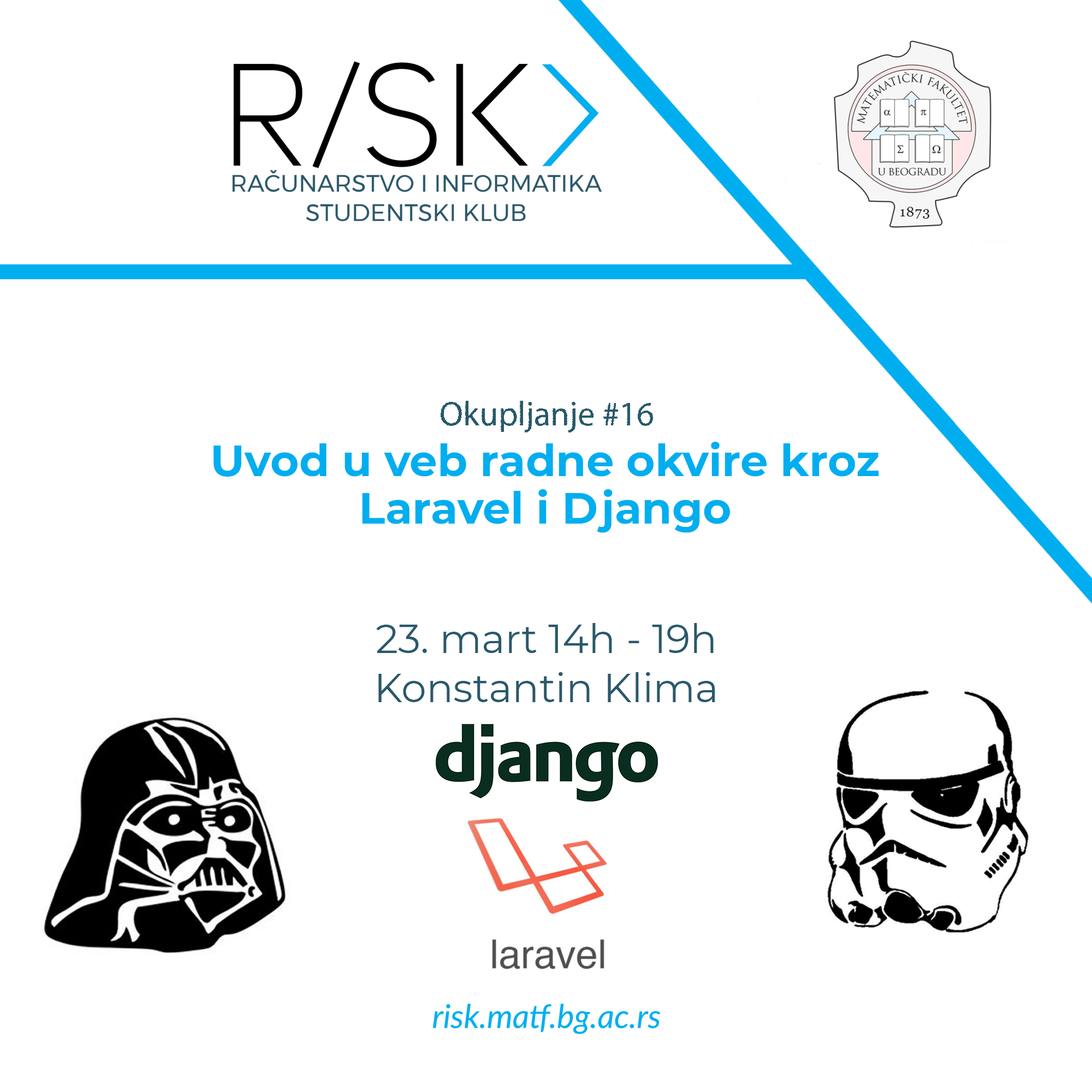
<style>
.page{position:relative;width:1092px;height:1092px;background:#ffffff}
.page>*{position:absolute;margin:0}
.t1{font:34.2px "MyriadPro-Regular";color:#29596b}
.t2{font:43.8px/47.5px "Montserrat-Bold";color:#00aeef}
.t3{font:39.8px/6.2px "Montserrat-Regular";color:#29596b}
</style>
<div class="page">
<p class="t1" style="left:441px;top:401px;width:212px;height:31px">Okupljanje #16</p>
<p class="t2" style="left:213px;top:442px;width:666px;height:91px;text-align:center">Uvod u veb radne okvire kroz<br>Laravel i Django</p>
<p class="t3" style="left:376px;top:623px;width:339px;height:79px;text-align:center">23. mart 14h - 19h<br><br><br><br><br><br><br><br>Konstantin Klima</p>
</div>
